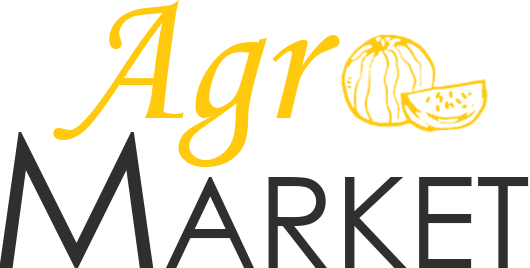
<style>
.page{position:relative;width:530px;height:268px;background:#ffffff}
.page>*{position:absolute;margin:0}
.t1{font:190.8px "MonotypeCorsiva";color:#ffc90d}
.t2{font:126.9px "CenturyGothic";color:#2f302e}
.t3{font:190.4px "CenturyGothic";color:#2f302e}
</style>
<div class="page">
<p class="t1" style="left:53px;top:0px;width:287px;height:167px">Agr</p>
<p class="t2" style="left:0px;top:132px;width:529px;height:136px"><span class="t3">M</span>ARKET</p>
</div>
